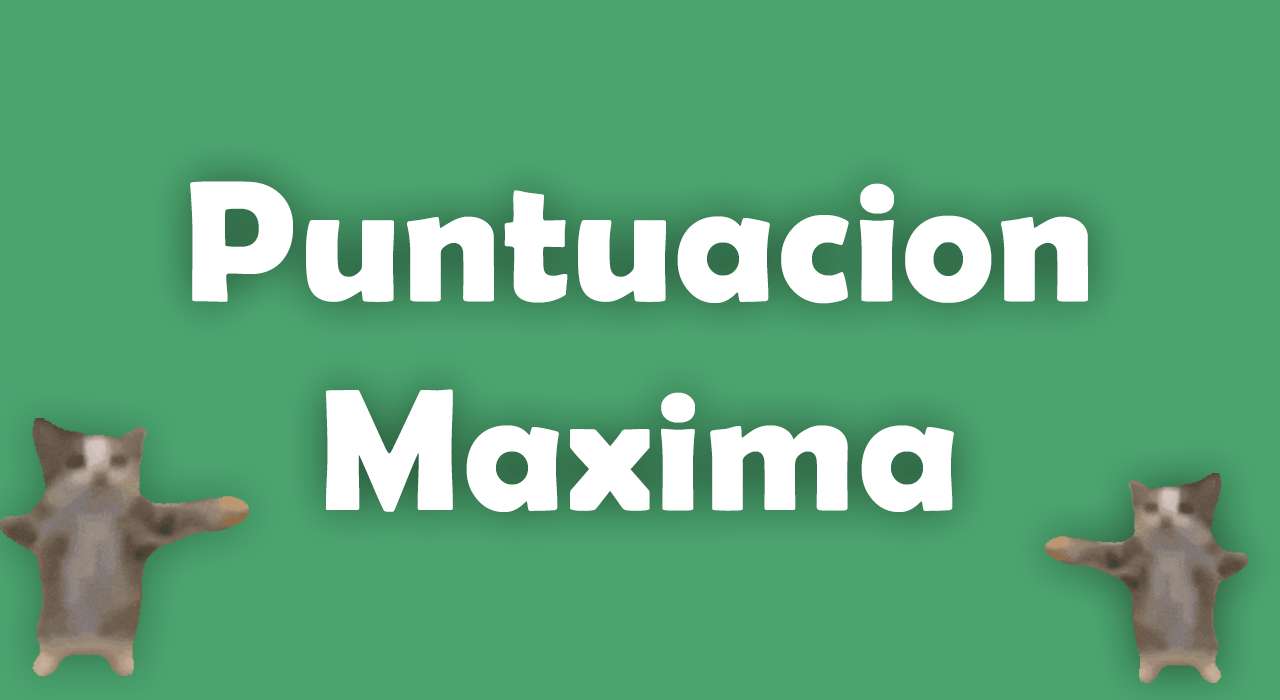
<style>
.page{position:relative;width:1280px;height:700px;background:#4ba56f}
.page>*{position:absolute;margin:0}
.t1{font:174.4px "BerlinSansFBDemi-Bold";letter-spacing:0.01em;color:#ffffff}
</style>
<div class="page">
<p class="t1" style="left:190px;top:181px;width:898px;height:331px;text-align:center">Puntuacion<br>Maxima</p>
</div>
